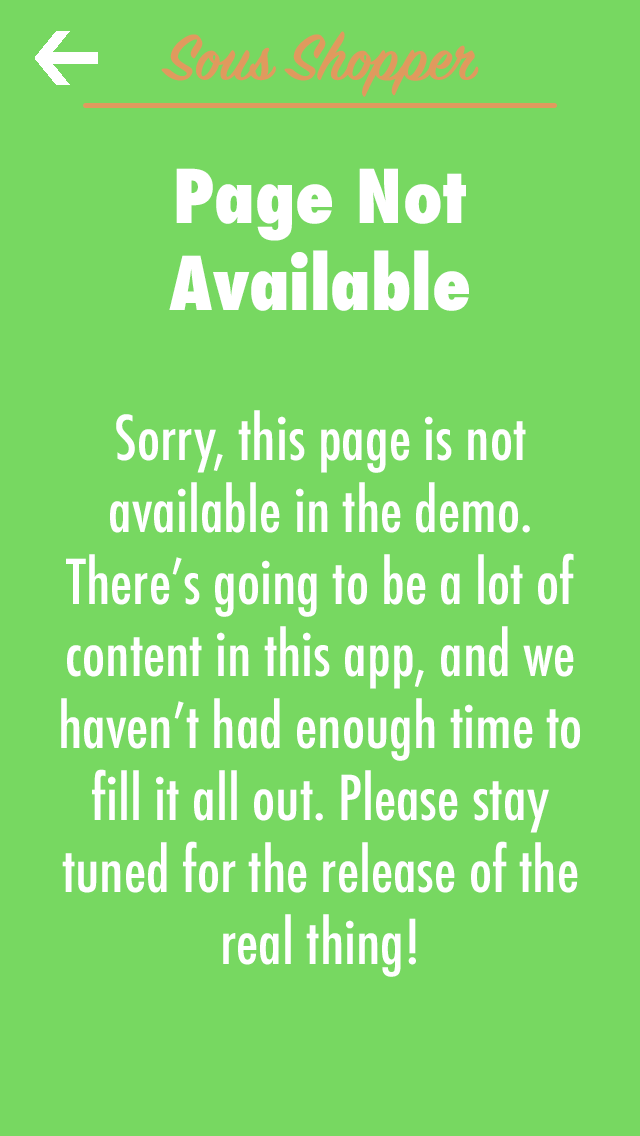
<style>
.page{position:relative;width:640px;height:1136px;background:#77d861}
.page>*{position:absolute;margin:0}
.t1{font:72px "Futura-CondensedExtraBold";color:#ffffff}
.t2{font:60px "Futura-CondensedMedium";color:#ffffff}
</style>
<div class="page">
<p class="t1" style="left:169px;top:168px;width:300px;height:143px;text-align:center">Page Not Available</p>
<p class="t2" style="left:61px;top:410px;width:519px;height:567px;text-align:center">Sorry, this page is not available in the demo. There’s going to be a lot of content in this app, and we haven’t had enough time to fill it all out. Please stay tuned for the release of the real thing!</p>
</div>
